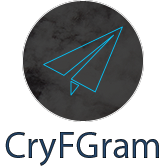
<style>
.page{position:relative;width:165px;height:168px;background:#ffffff}
.page>*{position:absolute;margin:0}
.t1{font:38px "MyriadPro-Regular"}
</style>
<div class="page">
<p class="t1" style="left:5px;top:132px;width:154px;height:34px">CryFGram</p>
</div>
